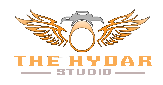
<style>
.page{position:relative;width:163px;height:85px;background:#ffffff}
.page>*{position:absolute;margin:0}
.t1{font:15.2px "HEADSOME&modif";color:#faac54;text-transform:uppercase;scale:2 1}
.t2{font:9.5px "HEADSOME&modif";color:#c1b1b1;text-transform:uppercase;scale:2 1}
</style>
<div class="page">
<p class="t1" style="left:14px;top:56px;width:138px;height:10px">The Hydar</p>
<p class="t2" style="left:57px;top:69px;width:54px;height:6px">Studio</p>
</div>
